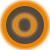
<style>
.page{position:relative;width:50px;height:50px}
.page>*{position:absolute;margin:0}
.t1{font:27.5px "PerpetuaTitlingMT-Light";color:#e78507}
</style>
<div class="page">
<p class="t1" style="left:13px;top:15px;width:23px;height:20px">O</p>
</div>
